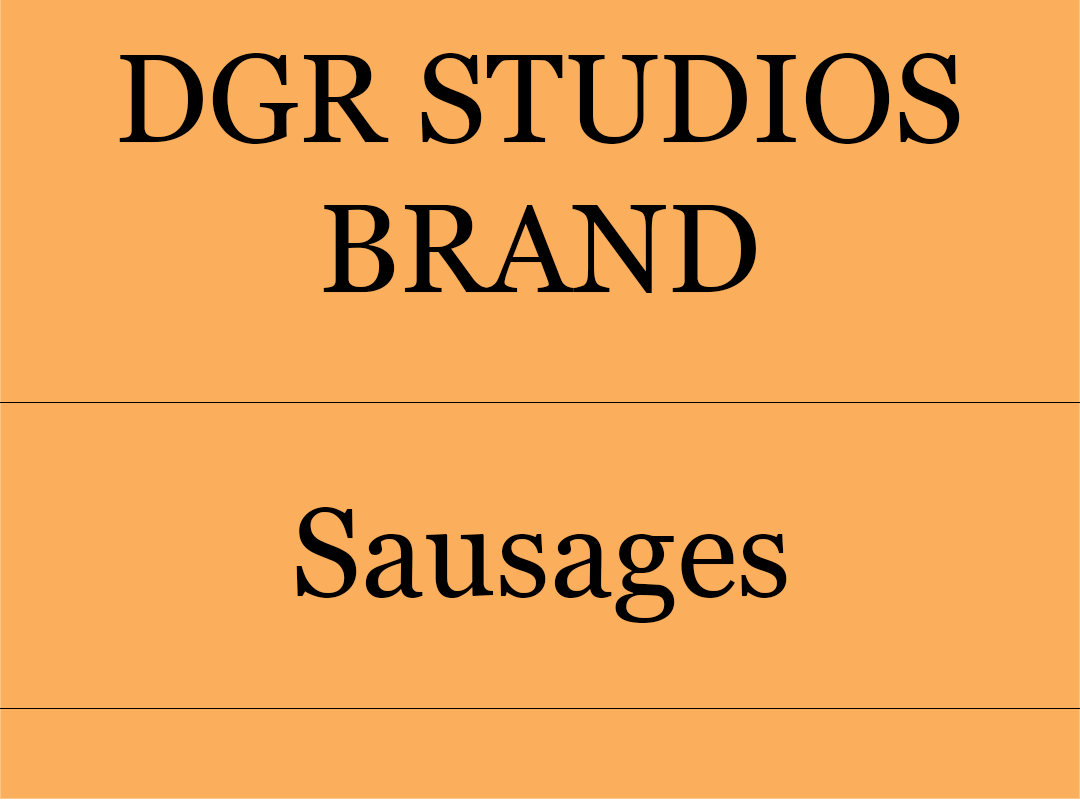
<style>
.page{position:relative;width:1080px;height:800px;background:#fbaf5d}
.page>*{position:absolute;margin:0}
.t1{font:125px "Georgia";color:#000000}
</style>
<div class="page">
<p class="t1" style="left:119px;top:53px;width:841px;height:240px;text-align:center">DGR STUDIOS<br>BRAND</p>
<p class="t1" style="left:296px;top:507px;width:491px;height:116px">Sausages</p>
</div>
